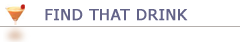
<style>
.page{position:relative;width:240px;height:42px;background:#ffffff}
.page>*{position:absolute;margin:0}
.t1{font:15px "Verdana";color:#636388;font-weight:bold}
</style>
<div class="page">
<p class="t1" style="left:45px;top:9px;width:143px;height:12px">FIND THAT DRINK</p>
</div>
